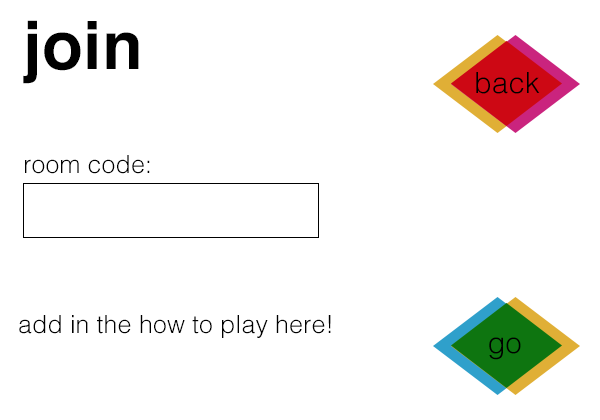
<style>
.page{position:relative;width:600px;height:420px;background:#ffffff}
.page>*{position:absolute;margin:0}
.t1{font:66.7px "Helvetica-Bold";letter-spacing:0.005em;color:#000000}
.t2{font:29.2px "Helvetica-Light";letter-spacing:0.005em;color:#000000}
.t3{font:25px "Helvetica-Light";letter-spacing:0.005em;color:#000000}
</style>
<div class="page">
<p class="t1" style="left:23px;top:20px;width:116px;height:64px">join</p>
<p class="t2" style="left:476px;top:72px;width:64px;height:22px">back</p>
<p class="t3" style="left:25px;top:155px;width:125px;height:19px">room code:</p>
<p class="t3" style="left:19px;top:315px;width:312px;height:23px">add in the how to play here!</p>
<p class="t2" style="left:489px;top:337px;width:32px;height:23px">go</p>
</div>
